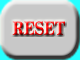
<style>
.page{position:relative;width:80px;height:60px;background:#c8c8c8}
.page>*{position:absolute;margin:0}
.t1{font:18px "MyungjoXB-HM"}
</style>
<div class="page">
<p class="t1" style="left:12px;top:21px;width:53px;height:14px">RESET</p>
</div>
